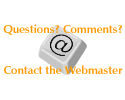
<style>
.page{position:relative;width:125px;height:100px;background:#ffffff}
.page>*{position:absolute;margin:0}
.t1{font:11.5px "ZapfHumanist601BT-Bold";color:#ff9900}
</style>
<div class="page">
<p class="t1" style="left:3px;top:24px;width:119px;height:12px">Questions? Comments?</p>
<p class="t1" style="left:4px;top:65px;width:119px;height:9px">Contact the Webmaster</p>
</div>
